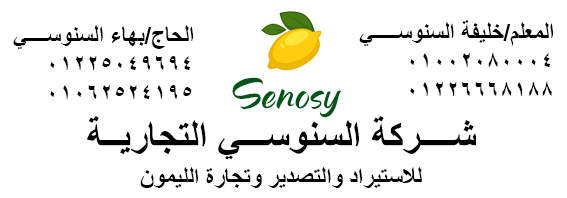
<style>
.page{position:relative;width:567px;height:198px;background:#ffffff}
.page>*{position:absolute;margin:0}
.t1{font:24px "Arial-BoldMT";color:#000000}
.t2{font:40px "Hamilyn";color:#015617}
.t3{font:40px "Arial-BoldMT";color:#000000}
.t4{font:25px "TimesNewRomanPS-BoldMT";color:#000001}
</style>
<div class="page">
<p class="t1" style="left:13px;top:25px;width:180px;height:74px">الحاج/بهاء السنوســــي      <br>01225049694  <br>01062524195</p>
<p class="t1" style="left:359px;top:20px;width:194px;height:76px">المعلم/خليفة السنوســـــي<br>01002080004  <br>01226668188</p>
<p class="t2" style="left:232px;top:77px;width:110px;height:41px">Senosy</p>
<p class="t3" style="left:87px;top:116px;width:389px;height:44px">شــــركة السنوســـي التجاريــة</p>
<p class="t4" style="left:140px;top:167px;width:282px;height:21px">للاستيراد والتصدير وتجارة الليمون</p>
</div>
